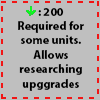
<style>
.page{position:relative;width:100px;height:100px;background:#bfbfbf}
.page>*{position:absolute;margin:0}
.t1{font:12px "MyriadPro-Bold";color:#000000}
</style>
<div class="page">
<p class="t1" style="left:18px;top:8px;width:66px;height:83px;text-align:center">: 200<br>Required for some units. Allows<br>researching upggrades</p>
</div>
